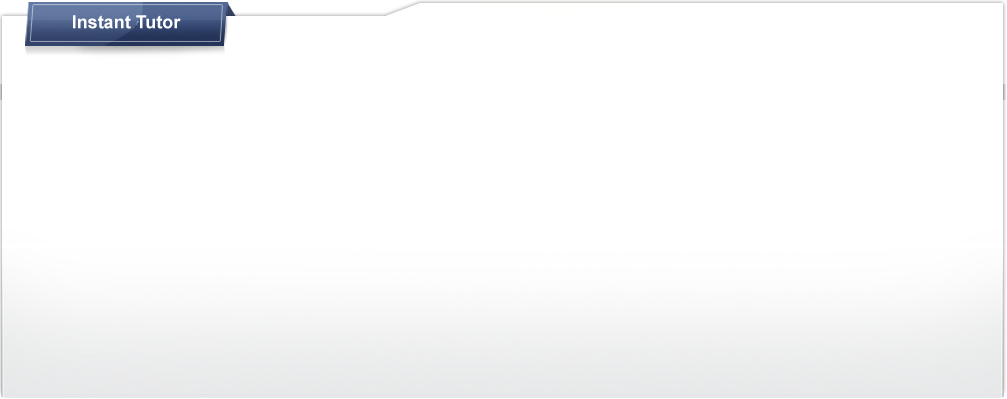
<style>
.page{position:relative;width:1007px;height:399px;background:#ffffff}
.page>*{position:absolute;margin:0}
.t1{font:18px "Arial-BoldMT";color:#ffffff}
</style>
<div class="page">
<p class="t1" style="left:73px;top:15px;width:108px;height:14px">Instant Tutor</p>
</div>
